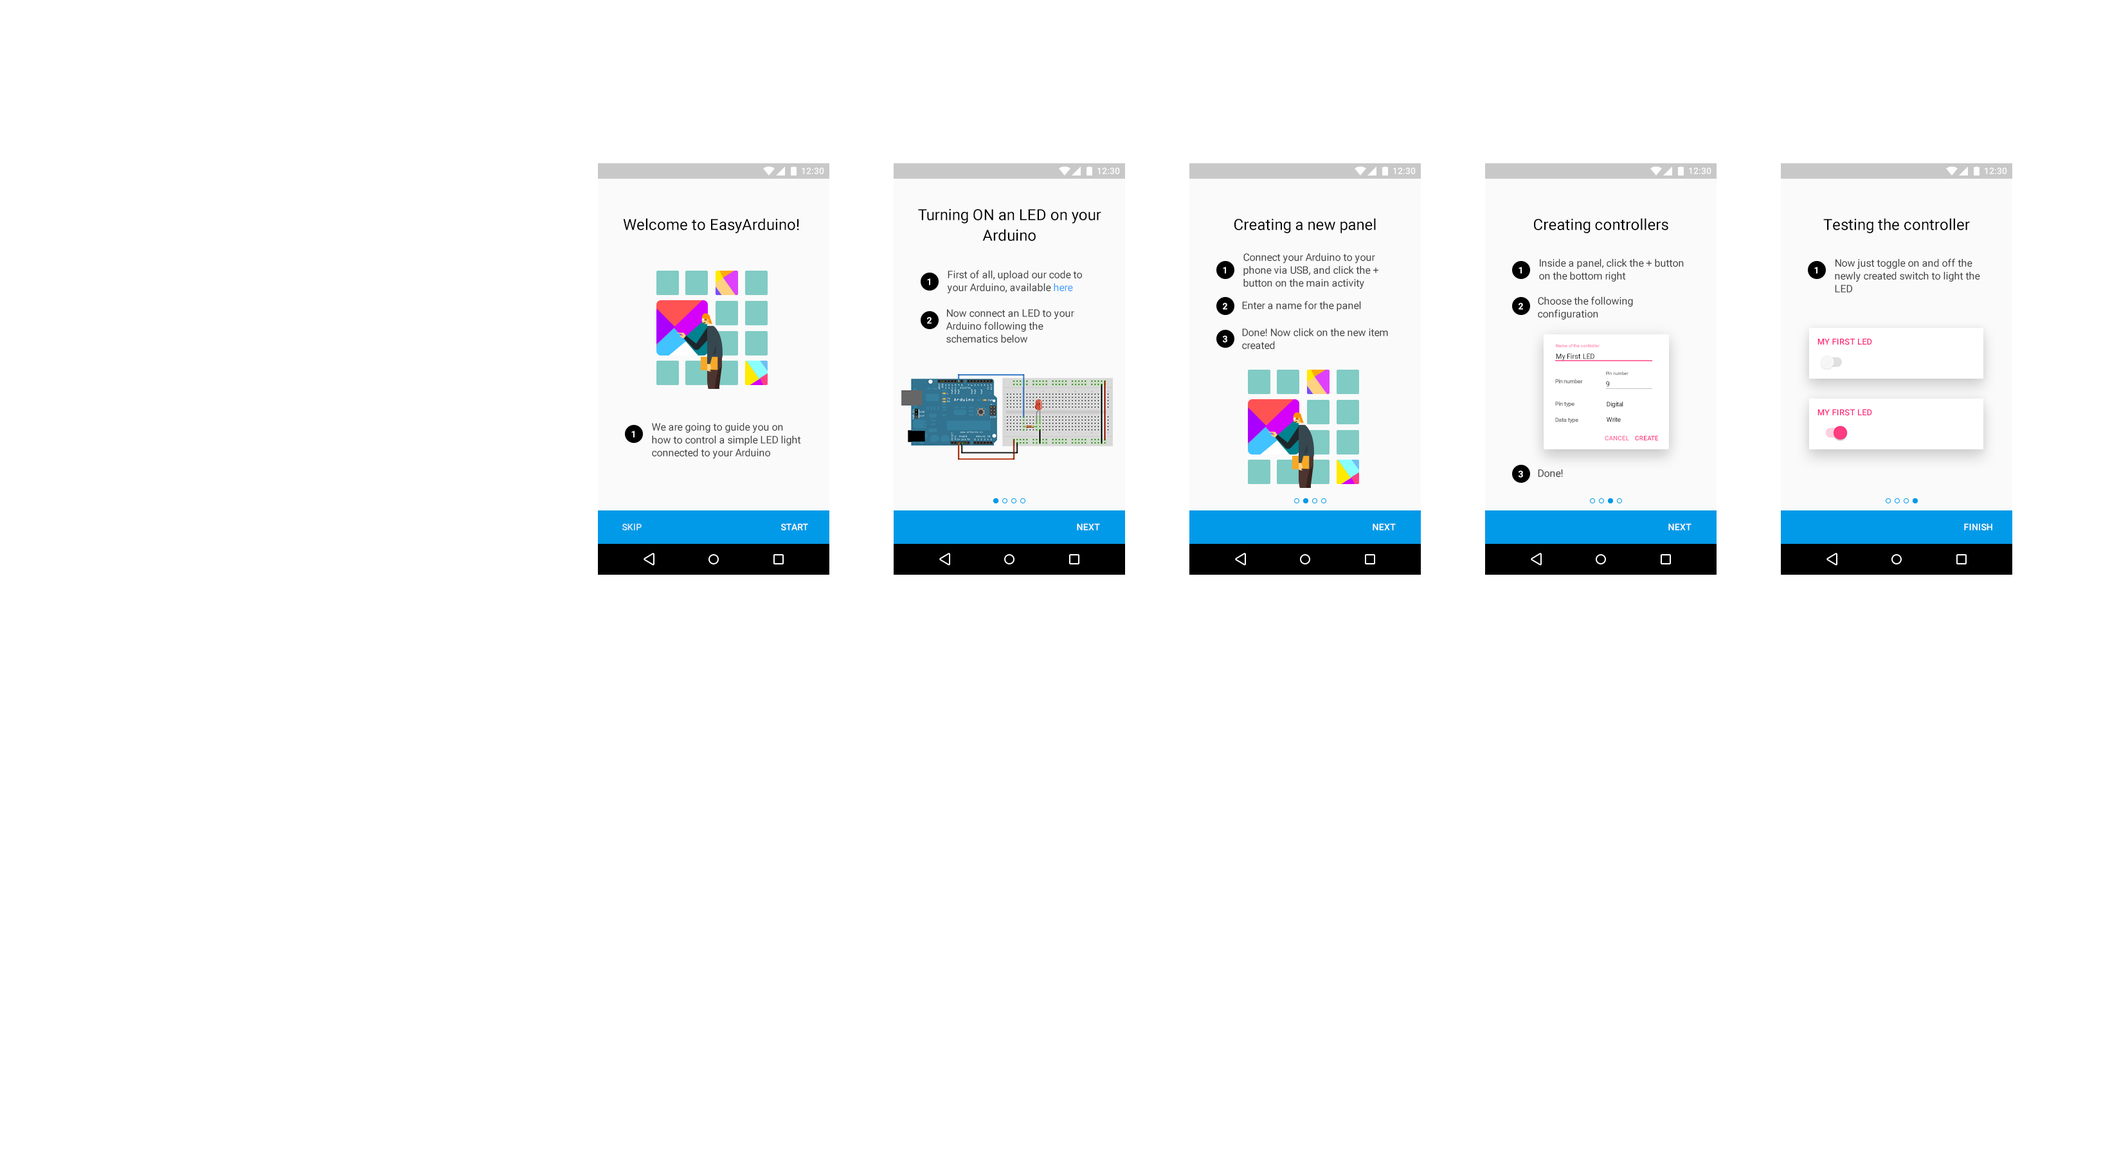
<style>
.page{position:relative;width:2119px;height:1152px;background:#ffffff}
.page>*{position:absolute;margin:0}
.t1{font:9px "Roboto-Medium";color:#fafafa}
.t2{font:15.4px/20.6px "Roboto-Regular";color:#000000}
.t3{font:15.4px "Roboto-Regular";color:#000000}
.t4{font:10.3px/12.9px "Roboto-Regular";color:#3f3f3f}
.t5{font:9px "Roboto-Bold";color:#ffffff}
.t6{font:10.3px "Roboto-Regular";color:#3f3f3f}
.t7{font:8.4px "Roboto-Medium";letter-spacing:0.02em;color:#ff2678}
.t8{font:7.1px "Roboto-Regular";letter-spacing:-0.02em;color:#000000}
.t9{font:4.5px "Roboto-Medium";letter-spacing:-0.02em;color:#fe89af}
.t10{font:4.5px "Roboto-Medium";letter-spacing:-0.02em}
.t11{font:5.8px "Roboto-Medium";letter-spacing:-0.04em;color:#777777}
.t12{font:7.1px "Roboto-Regular";letter-spacing:-0.02em}
.t13{font:5.8px "Roboto-Medium";letter-spacing:-0.02em;color:#777777}
.t14{font:6.4px "Roboto-Regular";letter-spacing:-0.02em}
.t15{font:6.4px "Roboto-Regular";color:#000000}
.t16{font:6.3px "Roboto-Medium";letter-spacing:0.025em;color:#fd71a0}
.t17{font:6.3px "Roboto-Medium";letter-spacing:0.025em;color:#fd3982}
.t18{font:9px "Roboto-Medium";letter-spacing:0.02em;color:#d4e8f9}
.t19{font:9px "Roboto-Medium";letter-spacing:0.02em;color:#ffffff}
</style>
<div class="page">
<p class="t1" style="left:802px;top:167px;width:22px;height:7px">12:30</p>
<p class="t1" style="left:1097px;top:167px;width:23px;height:7px">12:30</p>
<p class="t1" style="left:1393px;top:167px;width:23px;height:7px">12:30</p>
<p class="t1" style="left:1689px;top:167px;width:22px;height:7px">12:30</p>
<p class="t1" style="left:1985px;top:167px;width:22px;height:7px">12:30</p>
<p class="t2" style="left:918px;top:209px;width:183px;height:32px;text-align:center">Turning ON an LED on your Arduino</p>
<p class="t3" style="left:623px;top:218px;width:176px;height:15px">Welcome to EasyArduino!</p>
<p class="t3" style="left:1234px;top:218px;width:142px;height:15px">Creating a new panel</p>
<p class="t3" style="left:1534px;top:218px;width:134px;height:15px">Creating controllers</p>
<p class="t3" style="left:1823px;top:218px;width:147px;height:15px">Testing the controller</p>
<p class="t4" style="left:1243px;top:253px;width:135px;height:36px">Connect your Arduino to your phone via USB, and click the + button on the main activity</p>
<p class="t4" style="left:947px;top:270px;width:135px;height:24px">First of all, upload our code to your Arduino, available here</p>
<p class="t5" style="left:1223px;top:267px;width:3px;height:7px">1</p>
<p class="t5" style="left:1518px;top:267px;width:4px;height:7px">1</p>
<p class="t4" style="left:1539px;top:258px;width:145px;height:24px">Inside a panel, click the + button on the bottom right</p>
<p class="t5" style="left:1814px;top:267px;width:3px;height:7px">1</p>
<p class="t4" style="left:1835px;top:258px;width:145px;height:34px">Now just toggle on and off the newly created switch to light the LED</p>
<p class="t5" style="left:927px;top:278px;width:3px;height:7px">1</p>
<p class="t5" style="left:1223px;top:303px;width:4px;height:7px">2</p>
<p class="t6" style="left:1242px;top:301px;width:119px;height:10px">Enter a name for the panel</p>
<p class="t5" style="left:1518px;top:303px;width:5px;height:7px">2</p>
<p class="t4" style="left:1538px;top:296px;width:95px;height:24px">Choose the following configuration</p>
<p class="t5" style="left:927px;top:317px;width:5px;height:7px">2</p>
<p class="t4" style="left:946px;top:309px;width:128px;height:34px">Now connect an LED to your Arduino following the schematics below</p>
<p class="t4" style="left:1242px;top:328px;width:146px;height:21px">Done! Now click on the new item created</p>
<p class="t5" style="left:1223px;top:336px;width:4px;height:7px">3</p>
<p class="t7" style="left:1817px;top:338px;width:55px;height:7px">MY FIRST LED</p>
<p class="t8" style="left:1556px;top:354px;width:38px;height:7px">My First LED</p>
<p class="t9" style="left:1556px;top:344px;width:44px;height:4px">Name of the controller</p>
<p class="t10" style="left:1606px;top:372px;width:22px;height:3px">Pin number</p>
<p class="t11" style="left:1555px;top:379px;width:28px;height:5px">Pin number</p>
<p class="t12" style="left:1606px;top:381px;width:4px;height:6px">9</p>
<p class="t13" style="left:1555px;top:401px;width:19px;height:6px">Pin type</p>
<p class="t14" style="left:1607px;top:401px;width:16px;height:7px">Digital</p>
<p class="t7" style="left:1817px;top:409px;width:55px;height:7px">MY FIRST LED</p>
<p class="t4" style="left:652px;top:422px;width:149px;height:37px">We are going to guide you on how to control a simple LED light connected to your Arduino</p>
<p class="t13" style="left:1555px;top:417px;width:23px;height:6px">Data type</p>
<p class="t15" style="left:1607px;top:417px;width:14px;height:5px">Write</p>
<p class="t5" style="left:631px;top:431px;width:3px;height:7px">1</p>
<p class="t16" style="left:1605px;top:436px;width:24px;height:4px">CANCEL</p>
<p class="t17" style="left:1635px;top:436px;width:23px;height:4px">CREATE</p>
<p class="t5" style="left:1518px;top:471px;width:5px;height:7px">3</p>
<p class="t6" style="left:1538px;top:469px;width:25px;height:8px">Done!</p>
<p class="t18" style="left:622px;top:523px;width:20px;height:7px">SKIP</p>
<p class="t19" style="left:781px;top:523px;width:27px;height:7px">START</p>
<p class="t19" style="left:1077px;top:523px;width:23px;height:7px">NEXT</p>
<p class="t19" style="left:1372px;top:523px;width:24px;height:7px">NEXT</p>
<p class="t19" style="left:1668px;top:523px;width:23px;height:7px">NEXT</p>
<p class="t19" style="left:1964px;top:523px;width:28px;height:7px">FINISH</p>
</div>
